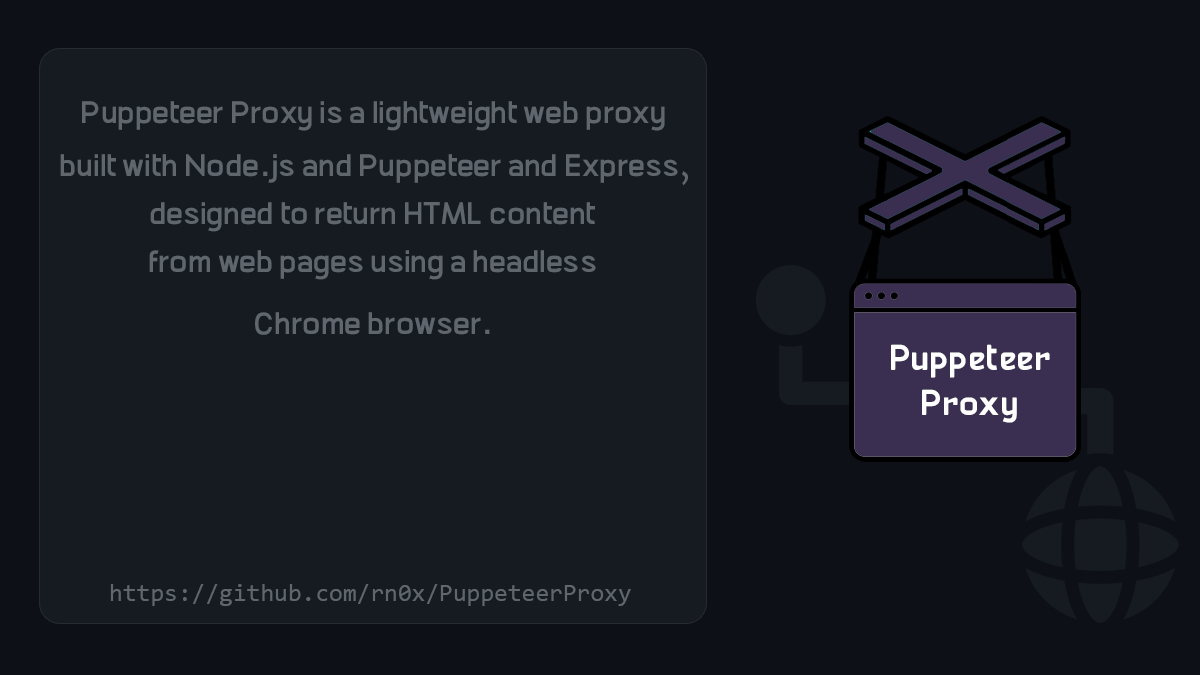
<style>
.page{position:relative;width:1200px;height:675px;background:#161b22}
.page>*{position:absolute;margin:0}
.t1{font:29.2px "AbdoMaster-Medium";color:#5f666e}
.t2{font:33.3px "AbdoMaster-DemiBold";color:#ffffff}
.t3{font:25px "Consolas";color:#5f666e}
</style>
<div class="page">
<p class="t1" style="left:82px;top:101px;width:583px;height:30px">Puppeteer Proxy is a lightweight web proxy</p>
<p class="t1" style="left:60px;top:154px;width:629px;height:32px">built with Node.js and Puppeteer and Express,</p>
<p class="t1" style="left:150px;top:202px;width:445px;height:30px">designed to return HTML content</p>
<p class="t1" style="left:149px;top:250px;width:447px;height:30px">from web pages using a headless</p>
<p class="t1" style="left:255px;top:312px;width:235px;height:23px">Chrome browser.</p>
<p class="t2" style="left:891px;top:344px;width:159px;height:34px">Puppeteer</p>
<p class="t2" style="left:922px;top:389px;width:95px;height:34px">Proxy</p>
<p class="t3" style="left:110px;top:584px;width:521px;height:22px">https://github.com/rn0x/PuppeteerProxy</p>
</div>
